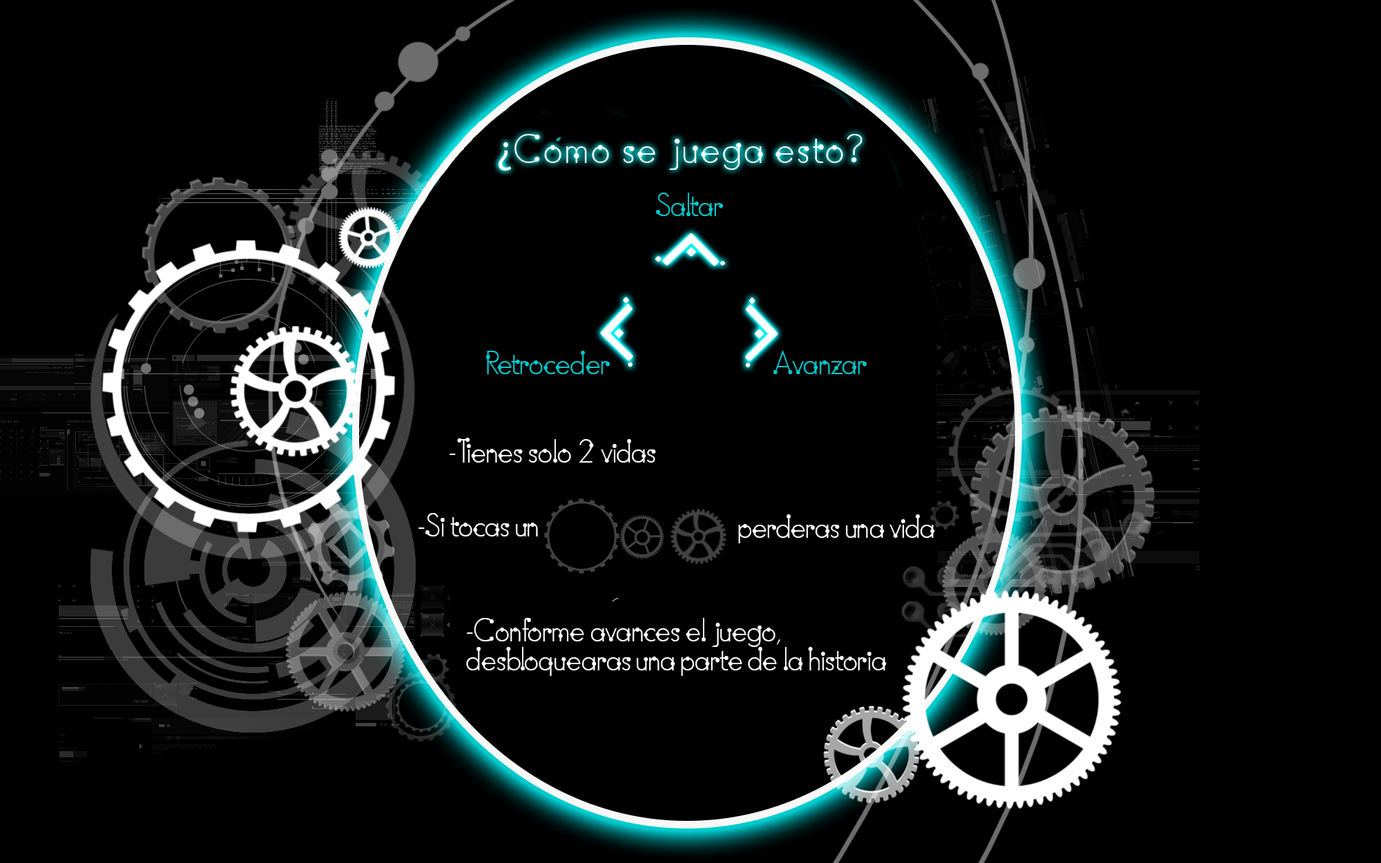
<style>
.page{position:relative;width:1381px;height:863px;background:#000000}
.page>*{position:absolute;margin:0}
.t1{font:32.6px "BoumBoumFreeversion";letter-spacing:-0.04em;color:#00c9cc;scale:0.95 1}
.t2{font:32.6px "BoumBoumFreeversion";letter-spacing:-0.04em;color:#ffffff;scale:0.95 1}
.t3{font:32.6px/28.8px "BoumBoumFreeversion";letter-spacing:-0.04em;color:#ffffff;scale:0.95 1}
</style>
<div class="page">
<p class="t1" style="left:656px;top:193px;width:67px;height:23px">Saltar</p>
<p class="t1" style="left:486px;top:351px;width:381px;height:23px">Retroceder                              Avanzar</p>
<p class="t2" style="left:450px;top:438px;width:206px;height:25px">-Tienes solo 2 vidas</p>
<p class="t2" style="left:419px;top:513px;width:119px;height:24px">-Si tocas un</p>
<p class="t2" style="left:738px;top:515px;width:197px;height:29px">perderas una vida</p>
<p class="t3" style="left:466px;top:618px;width:421px;height:58px;text-align:right">-Conforme avances el juego, <br>desbloquearas una parte de la historia</p>
</div>
